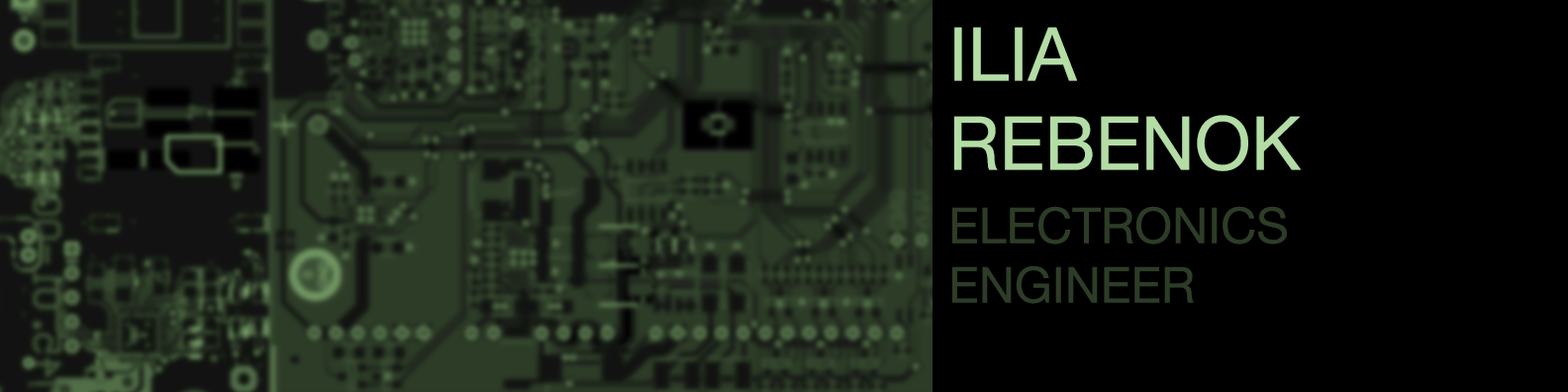
<style>
.page{position:relative;width:1568px;height:392px;background:#000000}
.page>*{position:absolute;margin:0}
.t1{font:74.2px "HelveticaNeue";color:#b4dda6}
.t2{font:49.5px "HelveticaNeue";color:#2d3c27}
</style>
<div class="page">
<p class="t1" style="left:954px;top:27px;width:347px;height:144px">ILIA <br>REBENOK</p>
<p class="t2" style="left:952px;top:206px;width:335px;height:98px">ELECTRONICS<br>ENGINEER</p>
</div>
